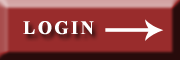
<style>
.page{position:relative;width:180px;height:60px;background:#992c2c}
.page>*{position:absolute;margin:0}
.t1{font:18.6px "TimesNewRomanPS-BoldMT";letter-spacing:0.26em;color:#ffffff;font-weight:bold}
</style>
<div class="page">
<p class="t1" style="left:23px;top:21px;width:71px;height:14px">LOGIN</p>
</div>
